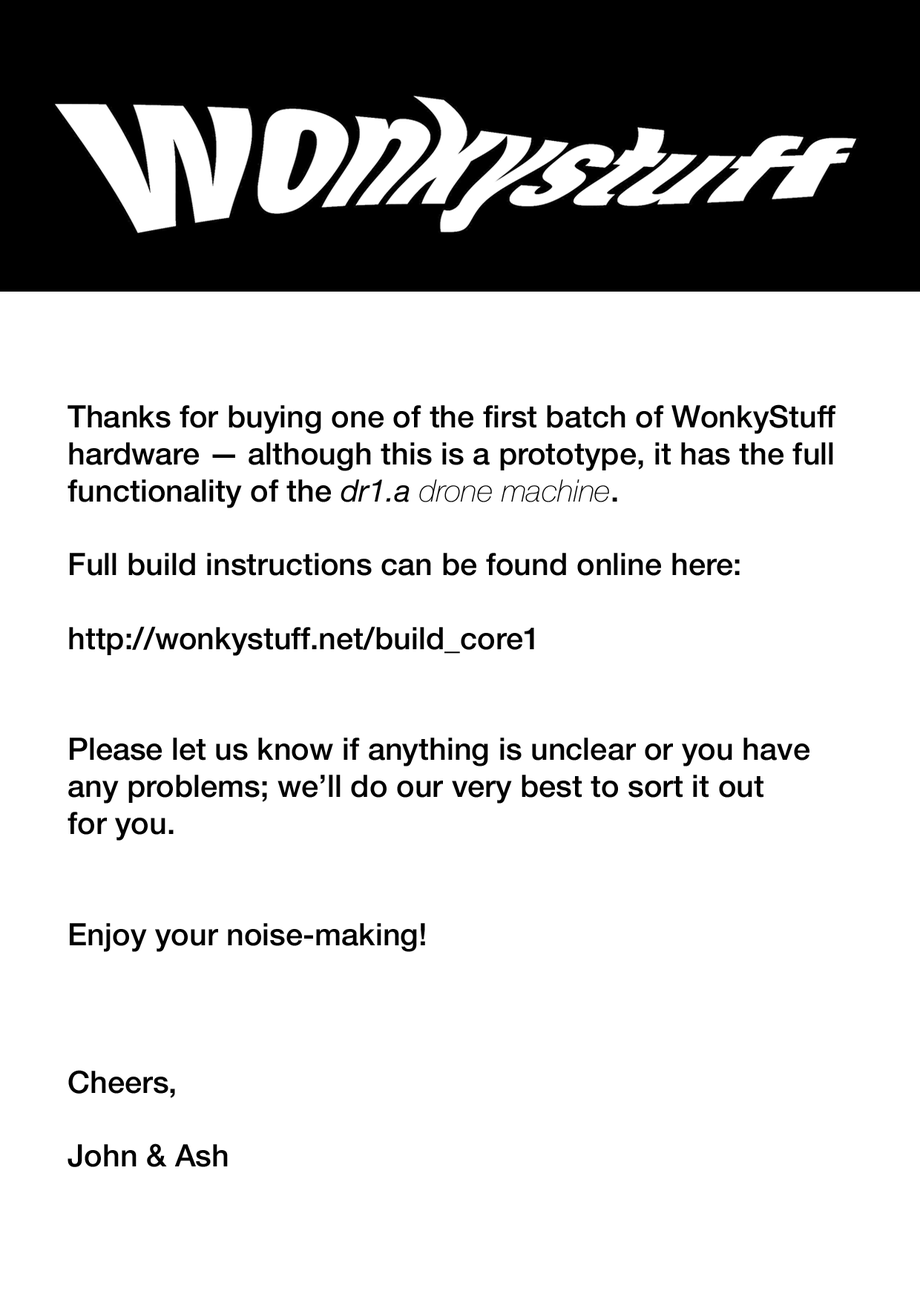
<style>
.page{position:relative;width:920px;height:1297px;background:#ffffff}
.page>*{position:absolute;margin:0}
.t1{font:30.8px "HelveticaNeue-Medium";color:#000000}
.t2{font:30.8px "HelveticaNeue-Italic";color:#000000}
.t3{font:30.8px "HelveticaNeue-ThinItalic";color:#000000}
</style>
<div class="page">
<p class="t1" style="left:67px;top:404px;width:769px;height:763px">Thanks for buying one of the first batch of WonkyStuff<br>hardware — although this is a prototype, it has the full<br>functionality of the <span class="t2">dr1.a</span><span class="t3"> drone machine</span>.<br><br>Full build instructions can be found online here:<br><br>http://wonkystuff.net/build_core1<br><br><br>Please let us know if anything is unclear or you have<br>any problems; we’ll do our very best to sort it out<br>for you.<br><br><br>Enjoy your noise-making!<br><br><br><br>Cheers,<br><br>John &amp; Ash</p>
</div>
